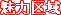
<style>
.page{position:relative;width:61px;height:15px;background:#ffffff}
.page>*{position:absolute;margin:0}
.t1{font:14px "SimSun";color:#ffffff;font-weight:bold}
</style>
<div class="page">
<p class="t1" style="left:1px;top:1px;width:59px;height:13px">魅力区域</p>
</div>
